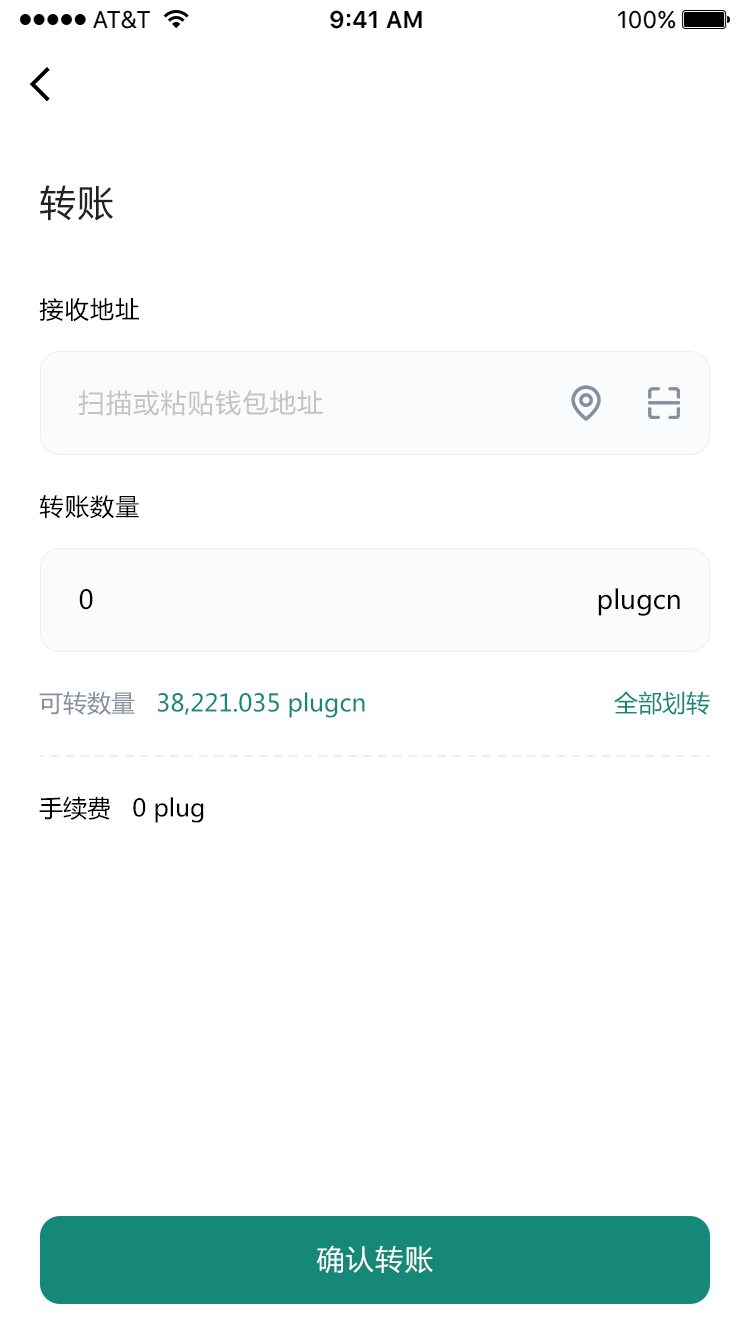
<style>
.page{position:relative;width:750px;height:1334px;background:#ffffff}
.page>*{position:absolute;margin:0}
.t1{font:36px "MicrosoftYaHei";letter-spacing:0.05em;color:#222222}
.t2{font:24px "MicrosoftYaHei";letter-spacing:0.05em;color:#000000}
.t3{font:26px "MicrosoftYaHei";letter-spacing:0.05em;color:#c2c3c3}
.t4{font:26px "MicrosoftYaHei";letter-spacing:0.05em;color:#000000}
.t5{font:26px "MicrosoftYaHei";color:#000000}
.t6{font:24px "MicrosoftYaHei";color:#168878}
.t7{font:24px "MicrosoftYaHei";color:#878e9f}
.t8{font:24px "MicrosoftYaHei";color:#000000}
.t9{font:28px "MicrosoftYaHei";letter-spacing:0.05em;color:#ffffff}
</style>
<div class="page">
<p class="t1" style="left:40px;top:185px;width:73px;height:36px">转账</p>
<p class="t2" style="left:39px;top:298px;width:100px;height:24px">接收地址</p>
<p class="t3" style="left:78px;top:390px;width:245px;height:26px">扫描或粘贴钱包地址</p>
<p class="t2" style="left:39px;top:495px;width:100px;height:24px">转账数量</p>
<p class="t4" style="left:79px;top:589px;width:14px;height:21px">0</p>
<p class="t5" style="left:598px;top:588px;width:82px;height:28px">plugcn</p>
<p class="t6" style="left:39px;top:691px;width:326px;height:27px"><span class="t7">可转数量   </span>38,221.035 plugcn</p>
<p class="t6" style="left:614px;top:691px;width:96px;height:24px">全部划转</p>
<p class="t8" style="left:39px;top:796px;width:165px;height:27px">手续费   0 plug</p>
<p class="t9" style="left:316px;top:1245px;width:117px;height:29px">确认转账</p>
</div>
